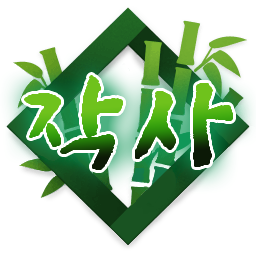
<style>
.page{position:relative;width:256px;height:256px;background:#ffffff}
.page>*{position:absolute;margin:0}
.t1{font:120.8px "SangSangRockOTF";letter-spacing:0.1em;scale:0.93 1}
.t2{font:114.8px "SangSangRockOTF";letter-spacing:0.12em;scale:0.93 1}
</style>
<div class="page">
<p class="t1" style="left:25px;top:76px;width:207px;height:93px">작<span class="t2">사</span></p>
</div>
